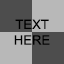
<style>
.page{position:relative;width:64px;height:64px;background:#b8b8b8}
.page>*{position:absolute;margin:0}
.t1{font:13px "ArialMT";letter-spacing:0.005em;color:#000000}
</style>
<div class="page">
<p class="t1" style="left:14px;top:19px;width:36px;height:26px;text-align:center">TEXT<br>HERE</p>
</div>
